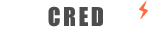
<style>
.page{position:relative;width:148px;height:32px;background:#ffffff}
.page>*{position:absolute;margin:0}
.t1{font:24px "Impact";letter-spacing:0.1em;color:#4d4d4d}
</style>
<div class="page">
<p class="t1" style="left:48px;top:6px;width:55px;height:21px">CRED</p>
</div>
